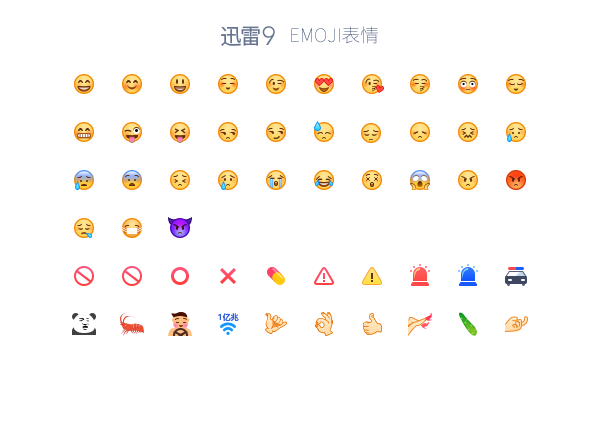
<style>
.page{position:relative;width:600px;height:432px;background:#ffffff}
.page>*{position:absolute;margin:0}
.t1{font:21.3px "NotoSansCJKsc-Regular";letter-spacing:-0.06em;color:#66748f}
.t2{font:26px "AvenirLTStd-Light";color:#66748f}
.t3{font:18.7px "NotoSansCJKsc-Thin";text-transform:uppercase}
.t4{font:18.7px "NotoSansCJKsc-Thin"}
.t5{font:8px "MicrosoftYaHei-Bold";color:#325edc}
</style>
<div class="page">
<p class="t1" style="left:221px;top:26px;width:39px;height:20px">迅雷</p>
<p class="t2" style="left:262px;top:26px;width:13px;height:19px">9</p>
<p class="t3" style="left:291px;top:26px;width:87px;height:18px">emoji<span class="t4">表情</span></p>
<p class="t5" style="left:218px;top:313px;width:21px;height:8px">1亿兆</p>
</div>
